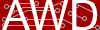
<style>
.page{position:relative;width:100px;height:30px;background:#a40000}
.page>*{position:absolute;margin:0}
.t1{font:41.4px "ArialMT";color:#fefefe}
</style>
<div class="page">
<p class="t1" style="left:2px;top:0px;width:96px;height:30px">AWD</p>
</div>
